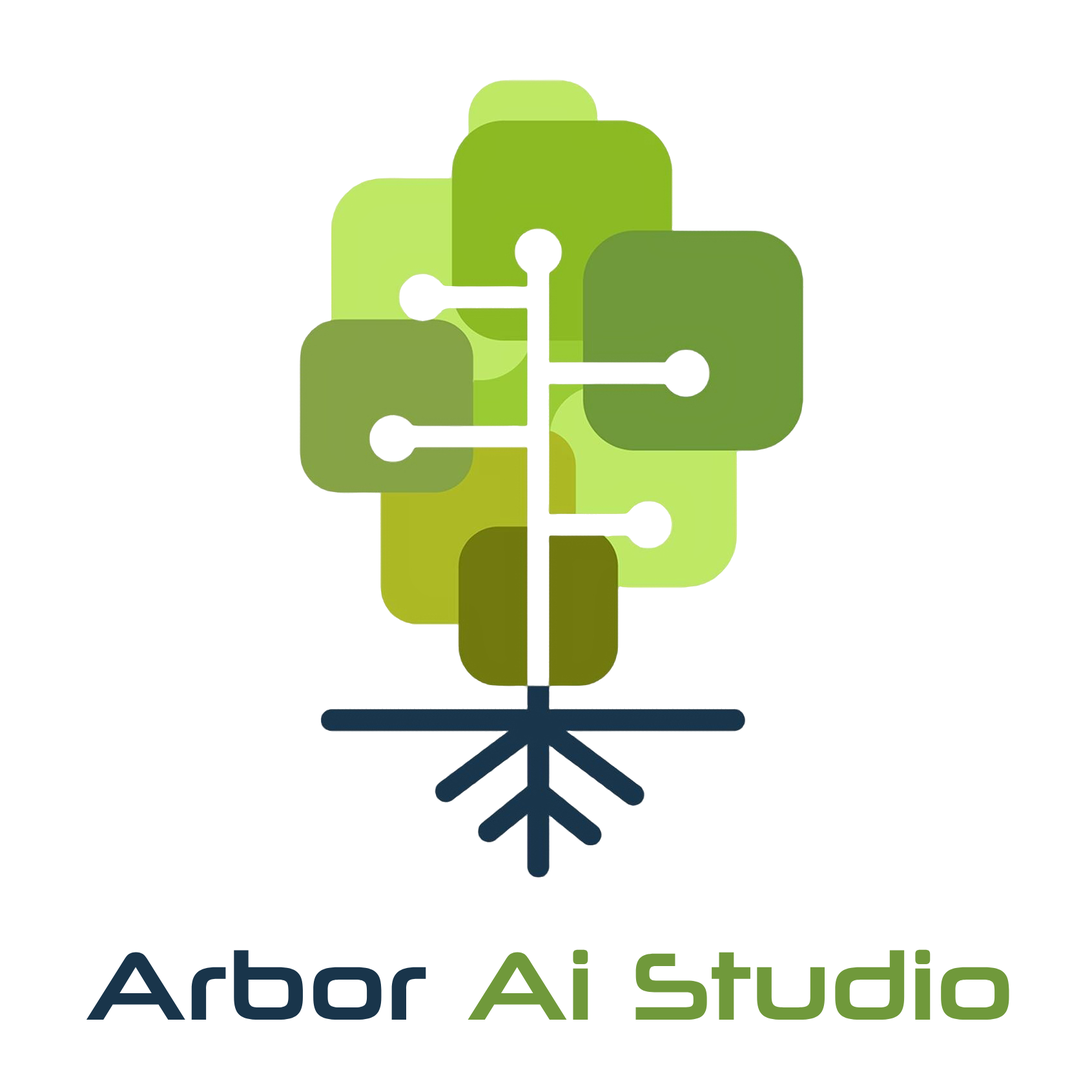
<style>
.page{position:relative;width:1092px;height:1092px;background:#ffffff}
.page>*{position:absolute;margin:0}
.t1{font:96.9px "NeuropoliticalRg-Regular";color:#70993b}
.t2{font:96.9px "NeuropoliticalRg-Regular";color:#19354b}
</style>
<div class="page">
<p class="t1" style="left:86px;top:949px;width:923px;height:71px"><span class="t2">Arbor </span>Ai Studio</p>
</div>
